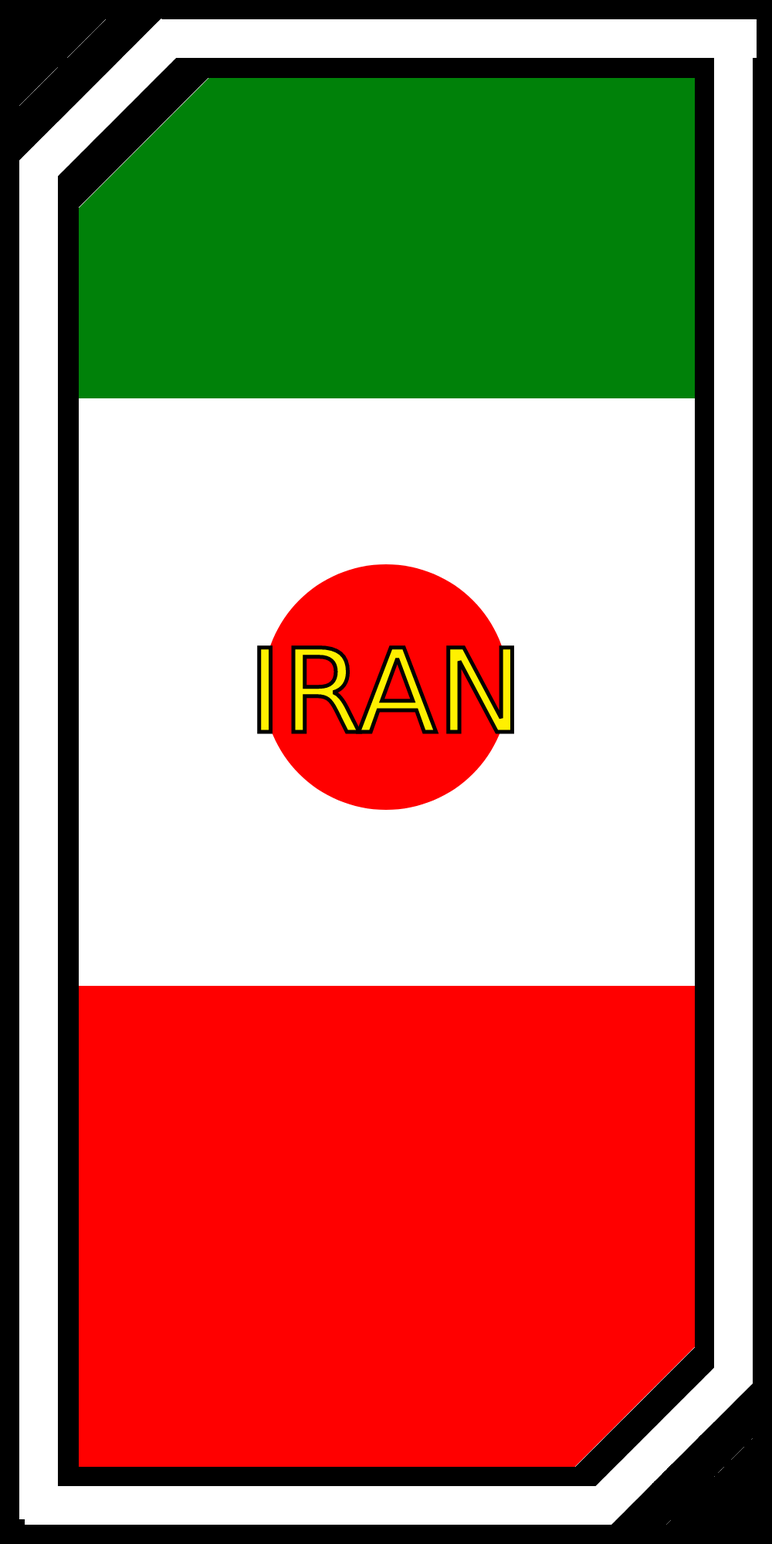
<style>
.page{position:relative;width:772px;height:1544px;background:#ffffff}
.page>*{position:absolute;margin:0}
.t1{font:115.8px "DejaVuSans"}
</style>
<div class="page">
<p class="t1" style="left:257px;top:646px;width:257px;height:88px">IRAN</p>
</div>
